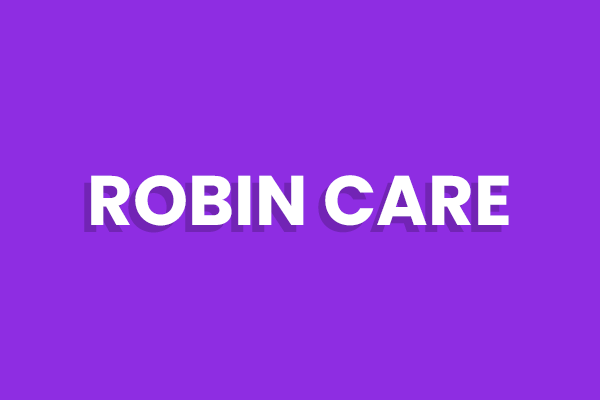
<style>
.page{position:relative;width:600px;height:400px;background:#8e2de2}
.page>*{position:absolute;margin:0}
.t1{font:70px "Poppins-Bold";color:#ffffff;text-transform:uppercase}
</style>
<div class="page">
<p class="t1" style="left:91px;top:175px;width:418px;height:51px">Robin Care</p>
</div>
